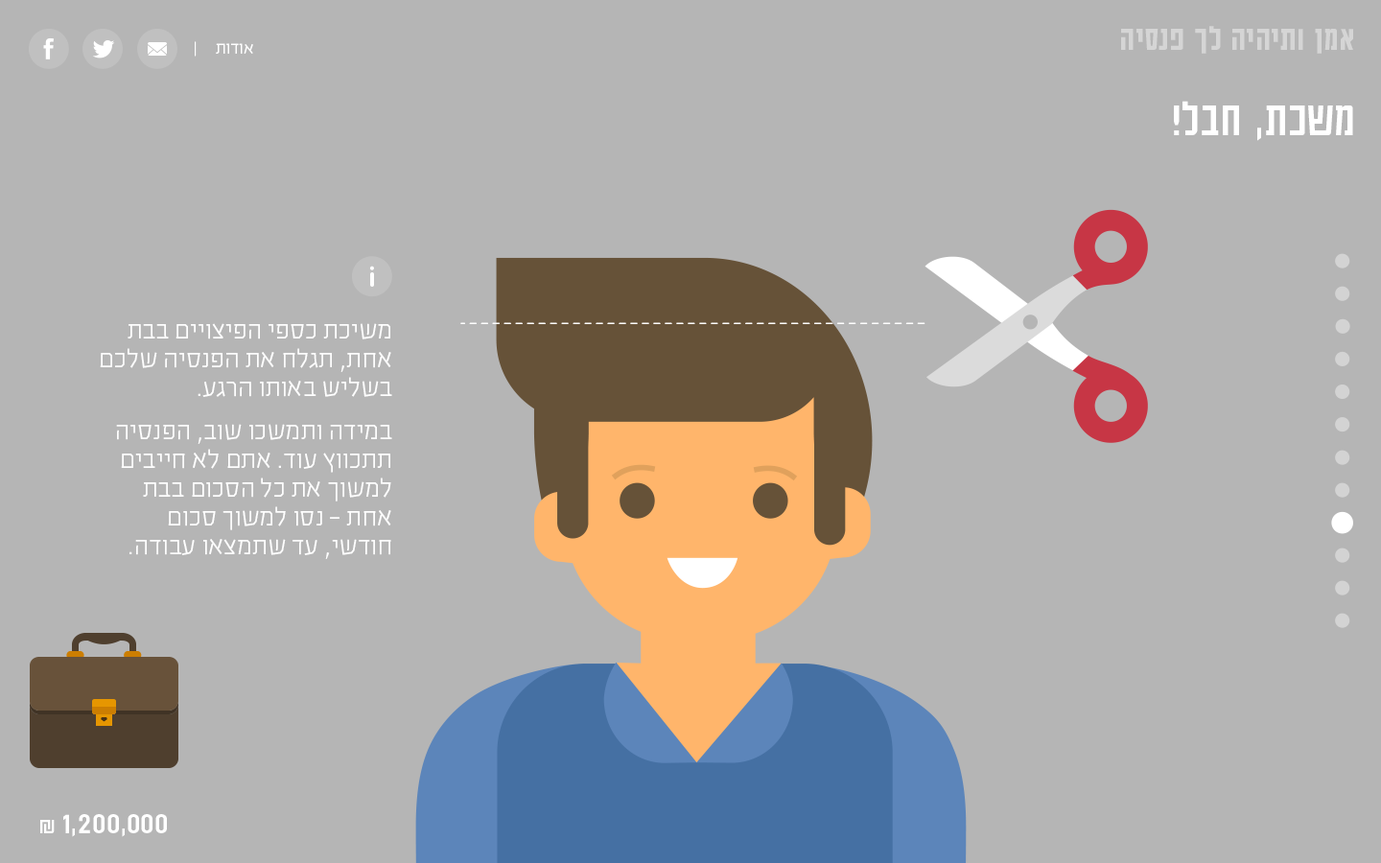
<style>
.page{position:relative;width:1381px;height:863px;background:#b5b5b5}
.page>*{position:absolute;margin:0}
.t1{font:37.8px "AdumaFOT-Medium";color:#d5d5d5}
.t2{font:19.2px "EzerBlock_OE-Light";color:#ffffff}
.t3{font:53.8px "AdumaFOT-Regular";color:#ffffff}
.t4{font:28.8px/28.8px "EzerBlock_OE-Light";color:#ffffff}
.t5{font:33.6px "AdumaFOT-Regular";color:#ffffff}
.t6{font:24px "AdumaFOT-Regular";color:#ffffff}
</style>
<div class="page">
<p class="t1" style="left:1121px;top:26px;width:232px;height:28px">אמן ותיהיה לך פנסיה</p>
<p class="t2" style="left:195px;top:41px;width:58px;height:16px">אודות     |</p>
<p class="t3" style="left:1174px;top:101px;width:179px;height:40px">משכת, חבל!</p>
<p class="t4" style="left:100px;top:323px;width:292px;height:236px">משיכת כספי הפיצויים בבת אחת, תגלח את הפנסיה שלכם בשליש באותו הרגע. <br><br>במידה ותמשכו שוב, הפנסיה תתכווץ עוד. אתם לא חייבים למשוך את כל הסכום בבת אחת - נסו למשוך סכום חודשי, עד שתמצאו עבודה.</p>
<p class="t5" style="left:40px;top:814px;width:127px;height:23px">1,200,000<span class="t6"> ₪</span></p>
</div>
